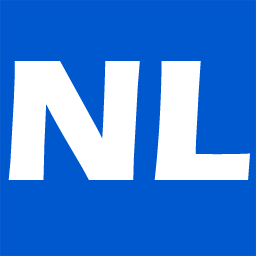
<style>
.page{position:relative;width:256px;height:256px;background:#0058cf}
.page>*{position:absolute;margin:0}
.t1{font:179.2px "ErasITC-Bold";color:#ffffff}
</style>
<div class="page">
<p class="t1" style="left:8px;top:61px;width:242px;height:119px">NL</p>
</div>
